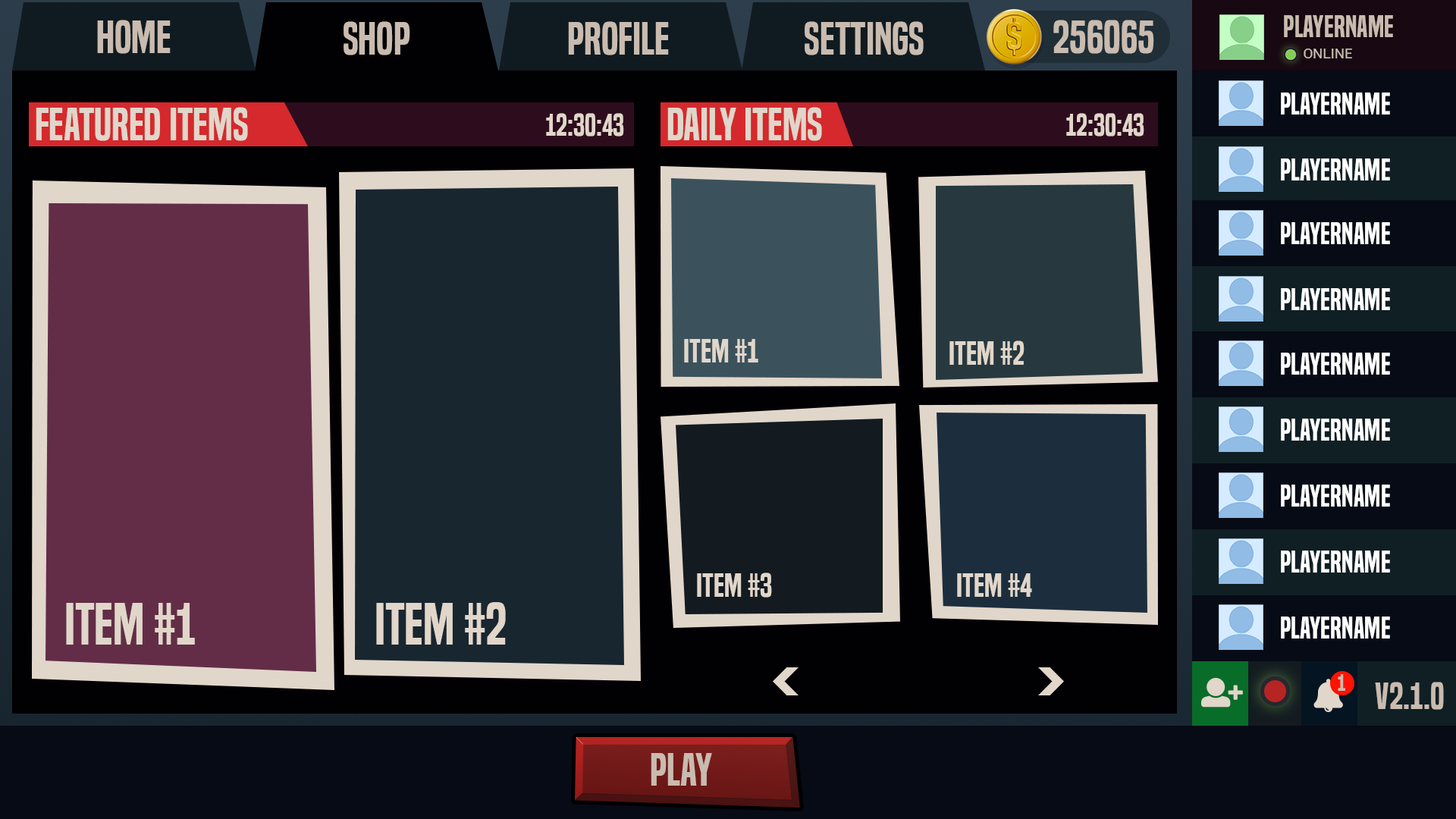
<style>
.page{position:relative;width:1456px;height:819px}
.page>*{position:absolute;margin:0}
.t1{font:28.4px "BuiltTitlingSb-Regular";color:#c9bbaf}
.t2{font:43.2px "BuiltTitlingSb-Regular";color:#c9bbaf}
.t3{font:14.1px "Roboto-Regular";color:#c9bbaf}
.t4{font:28.4px "BuiltTitlingSb-Regular";color:#ffffff}
.t5{font:43.2px "BuiltTitlingSb-Regular";color:#e1d6ca}
.t6{font:28.6px "BuiltTitlingSb-Regular";color:#e1d6ca}
.t7{font:31.2px "BuiltTitlingSb-Regular";color:#e1d6ca}
.t8{font:54.5px "BuiltTitlingSb-Regular";color:#e1d6ca}
.t9{font:21.8px "BuiltTitlingSb-Regular";color:#c9bbaf}
.t10{font:35.8px "BuiltTitlingSb-Regular";color:#c9bbaf}
</style>
<div class="page">
<p class="t1" style="left:1284px;top:15px;width:109px;height:22px">PLayerName</p>
<p class="t2" style="left:97px;top:20px;width:74px;height:34px">HOME</p>
<p class="t2" style="left:344px;top:21px;width:66px;height:34px">SHOP</p>
<p class="t2" style="left:568px;top:21px;width:101px;height:34px">PROFILE</p>
<p class="t2" style="left:805px;top:21px;width:119px;height:34px">Settings</p>
<p class="t2" style="left:1053px;top:20px;width:101px;height:34px">256065</p>
<p class="t3" style="left:1304px;top:49px;width:48px;height:9px">ONLINE</p>
<p class="t4" style="left:1281px;top:93px;width:109px;height:22px">PLayerName</p>
<p class="t5" style="left:36px;top:107px;width:212px;height:34px">FEATURED ITEMS</p>
<p class="t6" style="left:546px;top:113px;width:78px;height:23px">12:30:43</p>
<p class="t5" style="left:667px;top:107px;width:155px;height:34px">Daily Items</p>
<p class="t6" style="left:1066px;top:113px;width:78px;height:23px">12:30:43</p>
<p class="t4" style="left:1281px;top:158px;width:109px;height:22px">PLayerName</p>
<p class="t4" style="left:1281px;top:222px;width:109px;height:22px">PLayerName</p>
<p class="t4" style="left:1281px;top:288px;width:109px;height:22px">PLayerName</p>
<p class="t7" style="left:684px;top:339px;width:74px;height:23px">Item #1</p>
<p class="t7" style="left:949px;top:340px;width:75px;height:25px">Item #2</p>
<p class="t4" style="left:1281px;top:353px;width:109px;height:22px">PLayerName</p>
<p class="t4" style="left:1281px;top:419px;width:109px;height:22px">PLayerName</p>
<p class="t4" style="left:1281px;top:485px;width:109px;height:22px">PLayerName</p>
<p class="t4" style="left:1281px;top:551px;width:109px;height:22px">PLayerName</p>
<p class="t7" style="left:697px;top:573px;width:75px;height:25px">Item #3</p>
<p class="t7" style="left:957px;top:573px;width:75px;height:24px">Item #4</p>
<p class="t8" style="left:66px;top:603px;width:129px;height:42px">Item #1</p>
<p class="t8" style="left:376px;top:602px;width:130px;height:43px">Item #2</p>
<p class="t4" style="left:1281px;top:617px;width:109px;height:22px">PLayerName</p>
<p class="t9" style="left:1338px;top:674px;width:7px;height:17px">1</p>
<p class="t10" style="left:1375px;top:682px;width:69px;height:28px">v2.1.0</p>
<p class="t2" style="left:651px;top:753px;width:61px;height:33px">PLAY</p>
</div>
